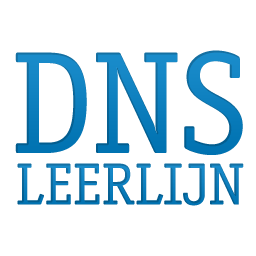
<style>
.page{position:relative;width:256px;height:256px;background:#ffffff}
.page>*{position:absolute;margin:0}
.t1{font:146.4px "OfficinaSerifStd-Book";color:#007fc5}
.t2{font:59.6px "OfficinaSerifStd-Book"}
</style>
<div class="page">
<p class="t1" style="left:15px;top:50px;width:228px;height:105px">DNS</p>
<p class="t2" style="left:17px;top:163px;width:227px;height:43px">LEERLIJN</p>
</div>
